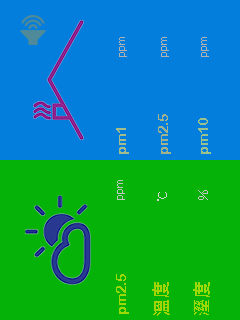
<style>
.page{position:relative;width:240px;height:320px;background:#037edc}
.page>*{position:absolute;margin:0}
.t1{font:12px "Calibri";color:#b1b1af}
.t2{font:12px "Calibri";color:#b3b3b0}
.t3{font:12px "Calibri";color:#b2b2b0}
.t4{font:14px "ArialRoundedMTBold";color:#a1b38d}
.t5{font:14px "ArialRoundedMTBold";color:#9bc28c}
.t6{font:14px "ArialRoundedMTBold";color:#a3bc8c}
.t7{font:12px "Calibri";color:#c4c4c2}
.t8{font:12px "DFKaiShu-SB-Estd-BF";color:#d5d5d1}
.t9{font:12px "DFKaiShu-SB-Estd-BF";color:#c4c4c2}
.t10{font:14px "ArialRoundedMTBold";color:#9dd908}
.t11{font:18px "MicrosoftJhengHeiUIBold";color:#a2d404}
.t12{font:18px "MicrosoftJhengHeiUIBold";color:#9dd906}
</style>
<div class="page">
<p class="t1" style="left:119px;top:37px;width:8px;height:20px;rotate:-90deg">ppm</p>
<p class="t2" style="left:161px;top:37px;width:8px;height:20px;rotate:-90deg">ppm</p>
<p class="t3" style="left:201px;top:37px;width:8px;height:20px;rotate:-90deg">ppm</p>
<p class="t4" style="left:158px;top:114px;width:13px;height:40px;rotate:-90deg">pm2.5</p>
<p class="t5" style="left:198px;top:118px;width:13px;height:36px;rotate:-90deg">pm10</p>
<p class="t6" style="left:116px;top:128px;width:13px;height:26px;rotate:-90deg">pm1</p>
<p class="t7" style="left:117px;top:180px;width:8px;height:20px;rotate:-90deg">ppm</p>
<p class="t8" style="left:157px;top:192px;width:10px;height:9px;rotate:-90deg">℃</p>
<p class="t9" style="left:198px;top:190px;width:10px;height:10px;rotate:-90deg">％</p>
<p class="t10" style="left:116px;top:274px;width:13px;height:40px;rotate:-90deg">pm2.5</p>
<p class="t11" style="left:152px;top:282px;width:18px;height:34px;rotate:-90deg">溫度</p>
<p class="t12" style="left:193px;top:282px;width:17px;height:33px;rotate:-90deg">溼度</p>
</div>
